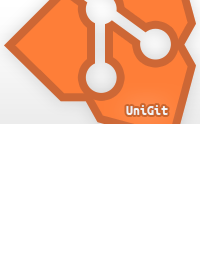
<style>
.page{position:relative;width:200px;height:258px;background:#ffffff}
.page>*{position:absolute;margin:0}
.t1{font:14px "UbuntuMono-Bold";color:#ffffff}
</style>
<div class="page">
<p class="t1" style="left:126px;top:105px;width:42px;height:10px">UniGit</p>
</div>
